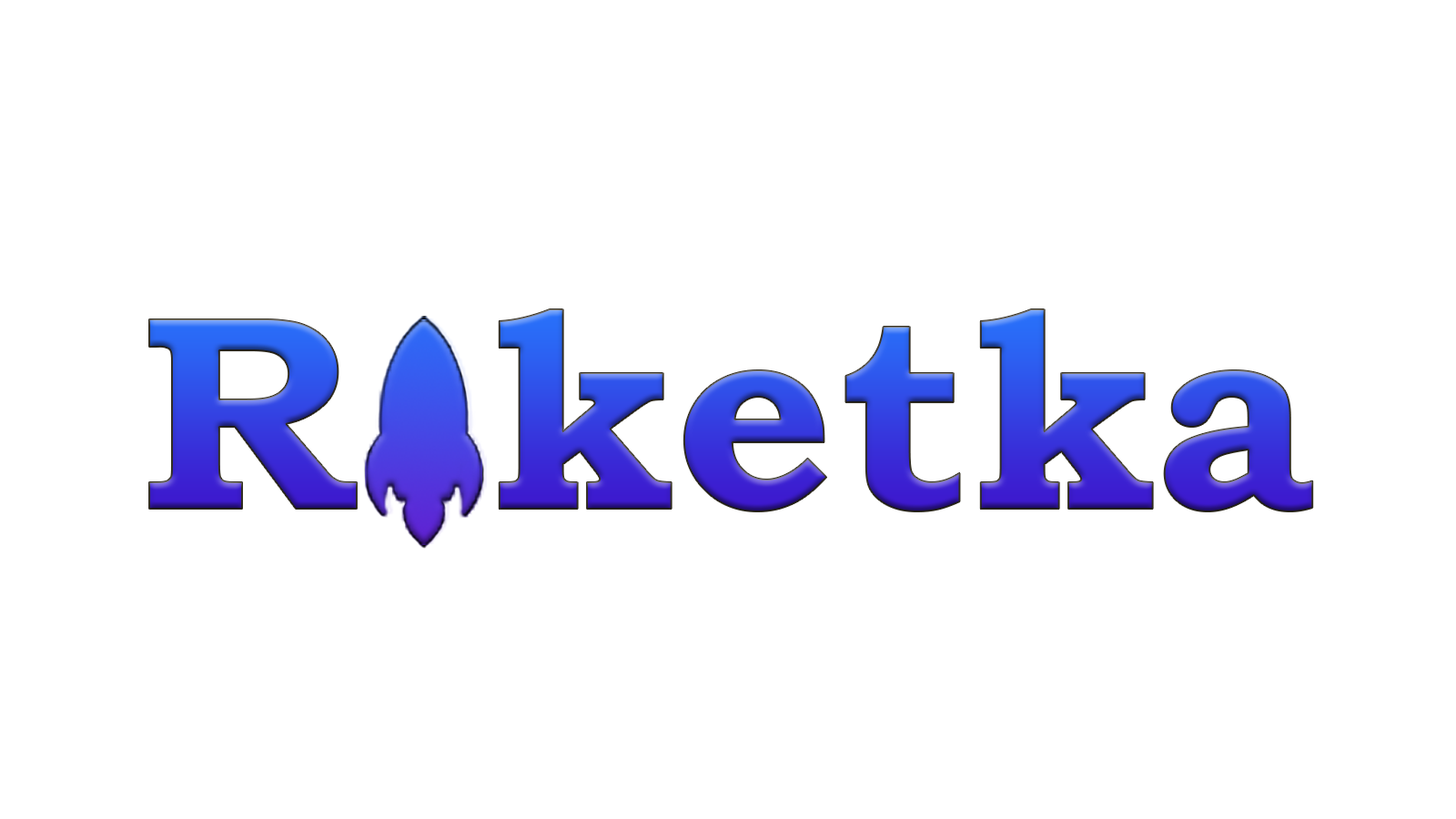
<style>
.page{position:relative;width:1456px;height:819px;background:#ffffff}
.page>*{position:absolute;margin:0}
.t1{font:278.3px "BookmanOldStyle-Bold";letter-spacing:0.01em}
</style>
<div class="page">
<p class="t1" style="left:149px;top:309px;width:1164px;height:202px">R ketka</p>
</div>
